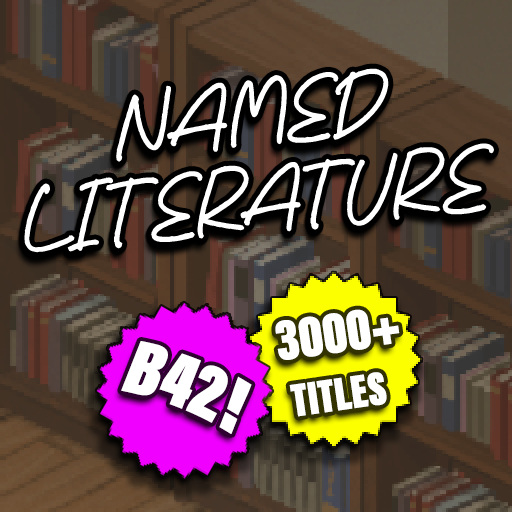
<style>
.page{position:relative;width:512px;height:512px}
.page>*{position:absolute;margin:0}
.t1{font:71.6px "ReyhartSejenack";color:#ffffff}
.t2{font:48px "AcuminConcept-ExtraCondensedUltraBlack";color:#ffffff}
.t3{font:60px "AcuminConcept-ExtraCondensedUltraBlack";color:#ffffff}
.t4{font:80px "AcuminConcept-ExtraCondensedUltraBlack";color:#ffffff}
</style>
<div class="page">
<p class="t1" style="left:24px;top:68px;width:470px;height:185px;rotate:-5deg">NAMED LITERATURE</p>
<p class="t2" style="left:275px;top:309px;width:125px;height:108px;text-align:center;rotate:-8deg"><span class="t3">  3000+ <br></span>TITLES</p>
<p class="t4" style="left:121px;top:341px;width:131px;height:93px;rotate:22deg">B42!</p>
</div>
